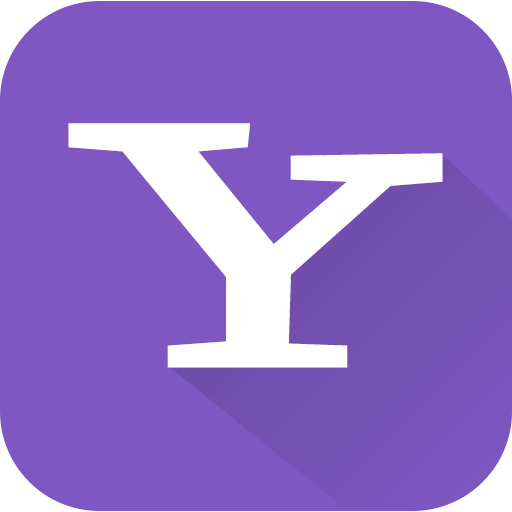
<style>
.page{position:relative;width:512px;height:512px;background:#7e57c2}
.page>*{position:absolute;margin:0}
.t1{font:300px "Yahoo";letter-spacing:-0.04em;color:#ffffff}
</style>
<div class="page">
<p class="t1" style="left:68px;top:123px;width:375px;height:245px">Y</p>
</div>
